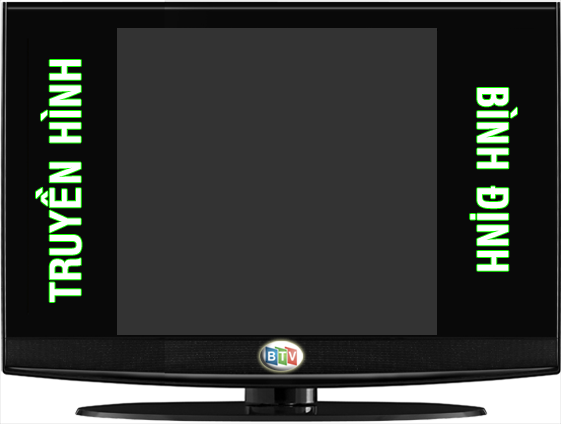
<style>
.page{position:relative;width:561px;height:424px;background:#333333}
.page>*{position:absolute;margin:0}
.t1{font:41.1px "VNI-Helve-Condense-Bold";color:#ffffff}
</style>
<div class="page">
<p class="t1" style="left:36px;top:60px;width:46px;height:242px;rotate:-90deg">TRUYEÀN HÌNH</p>
<p class="t1" style="left:470px;top:88px;width:47px;height:183px;rotate:90deg">BÌNH ÑÒNH</p>
</div>
